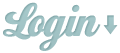
<style>
.page{position:relative;width:120px;height:53px;background:#ffffff}
.page>*{position:absolute;margin:0}
.t1{font:48px "HomeRunScript-roman";letter-spacing:-0.025em;color:#a6c9cb}
</style>
<div class="page">
<p class="t1" style="left:3px;top:2px;width:98px;height:49px">Login</p>
</div>
